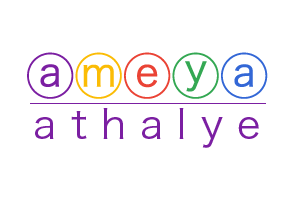
<style>
.page{position:relative;width:300px;height:200px;background:#ffffff}
.page>*{position:absolute;margin:0}
.t1{font:48px "HiraKakuProN-W3";letter-spacing:0.01em;color:#7b1fa2}
.t2{font:48px "HiraKakuProN-W3";letter-spacing:0.01em;color:#fbbc05}
.t3{font:48px "HiraKakuProN-W3";letter-spacing:0.01em;color:#ea4335}
.t4{font:48px "HiraKakuProN-W3";letter-spacing:0.01em;color:#34a853}
.t5{font:48px "HiraKakuProN-W3";letter-spacing:0.01em;color:#3367d6}
.t6{font:40px "HiraKakuProN-W3";letter-spacing:0.36em;color:#7b1fa2}
</style>
<div class="page">
<p class="t1" style="left:27px;top:52px;width:241px;height:47px">a<span class="t2">m</span><span class="t3">e</span><span class="t4">y</span><span class="t5">a</span></p>
<p class="t6" style="left:35px;top:108px;width:224px;height:40px">athalye</p>
</div>
